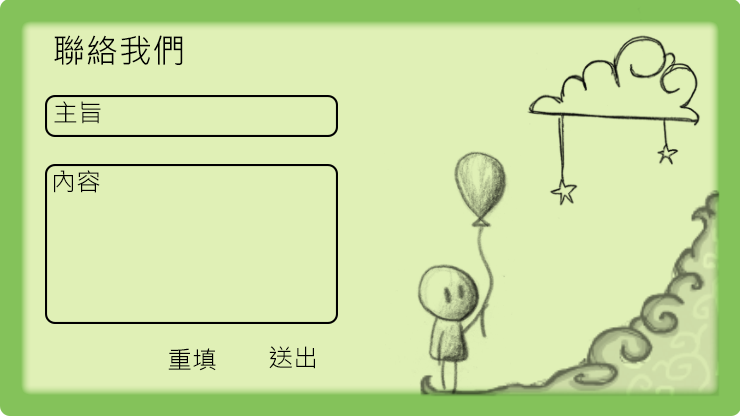
<style>
.page{position:relative;width:740px;height:416px;background:#e0f0b6}
.page>*{position:absolute;margin:0}
.t1{font:33.3px "MicrosoftJhengHeiRegular";color:#000000}
.t2{font:25px "MicrosoftJhengHeiRegular";color:#000000}
</style>
<div class="page">
<p class="t1" style="left:54px;top:35px;width:129px;height:30px">聯絡我們</p>
<p class="t2" style="left:54px;top:101px;width:47px;height:23px">主旨</p>
<p class="t2" style="left:54px;top:170px;width:46px;height:23px">內容</p>
<p class="t2" style="left:168px;top:348px;width:48px;height:23px">重填</p>
<p class="t2" style="left:269px;top:346px;width:46px;height:23px">送出</p>
</div>
